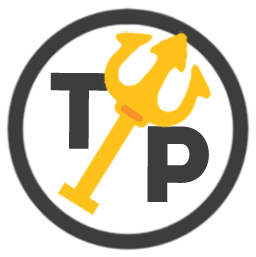
<style>
.page{position:relative;width:256px;height:257px;background:#ffffff}
.page>*{position:absolute;margin:0}
.t1{font:107.8px "Intro";letter-spacing:0.02em;color:#3d3d3d}
</style>
<div class="page">
<p class="t1" style="left:50px;top:72px;width:58px;height:77px">T</p>
<p class="t1" style="left:147px;top:126px;width:62px;height:76px">P</p>
</div>
